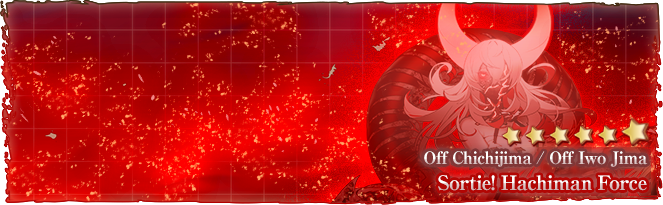
<style>
.page{position:relative;width:663px;height:205px}
.page>*{position:absolute;margin:0}
.t1{font:17px "RyuminPro-ExBold";letter-spacing:-0.04em}
.t2{font:20px "RyuminPro-ExBold";letter-spacing:-0.04em}
</style>
<div class="page">
<p class="t1" style="left:424px;top:151px;width:224px;height:16px">Off Chichijima / Off Iwo Jima</p>
<p class="t2" style="left:438px;top:175px;width:209px;height:16px">Sortie! Hachiman Force</p>
</div>
